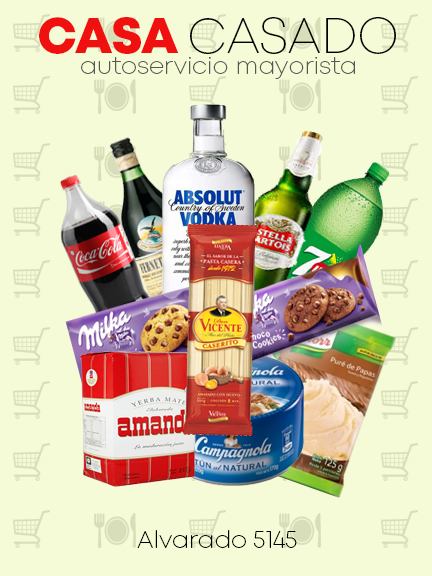
<style>
.page{position:relative;width:432px;height:576px;background:#f5fbd6}
.page>*{position:absolute;margin:0}
.t1{font:50px "Mont-ExtraLightDEMO";color:#000000}
.t2{font:50px "Mont-HeavyDEMO";color:#f01010}
.t3{font:24px "Mont-ExtraLightDEMO";color:#575755}
.t4{font:24px "Mont-ExtraLightDEMO";color:#000000}
</style>
<div class="page">
<p class="t1" style="left:39px;top:17px;width:357px;height:37px"><span class="t2">CASA </span>CASADO</p>
<p class="t3" style="left:81px;top:57px;width:274px;height:22px">autoservicio mayorista</p>
<p class="t4" style="left:137px;top:530px;width:160px;height:18px">Alvarado 5145</p>
</div>
